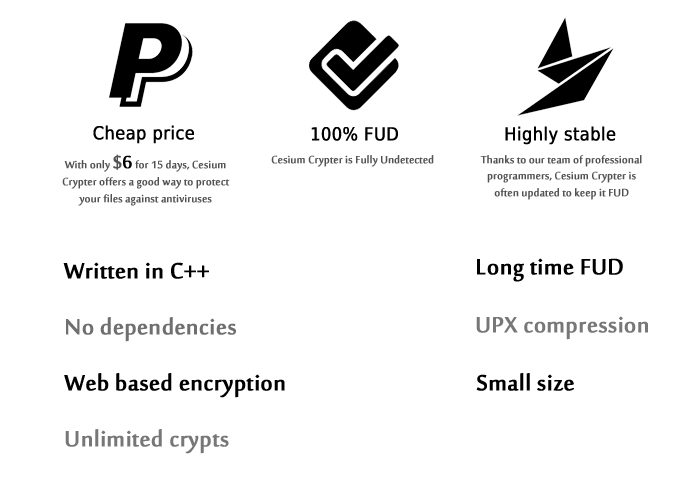
<style>
.page{position:relative;width:700px;height:500px;background:#ffffff}
.page>*{position:absolute;margin:0}
.t1{font:18px "DejaVuSansCondensed";color:#000000;font-weight:bold}
.t2{font:14px "SakkalMajalla";color:#525252;font-weight:bold}
.t3{font:24px "SakkalMajalla";color:#525252;font-weight:bold}
.t4{font:24px "SakkalMajalla";color:#000000;font-weight:bold}
.t5{font:30px "SakkalMajalla";color:#000000;font-weight:bold}
.t6{font:30px "SakkalMajalla";color:#6f6f6f;font-weight:bold}
.t7{font:30px "SakkalMajalla";color:#777777;font-weight:bold}
</style>
<div class="page">
<p class="t1" style="left:93px;top:125px;width:101px;height:19px">Cheap price</p>
<p class="t1" style="left:505px;top:126px;width:111px;height:19px">Highly stable</p>
<p class="t1" style="left:311px;top:127px;width:87px;height:14px">100% FUD</p>
<p class="t2" style="left:62px;top:154px;width:168px;height:52px;text-align:center">With only <span class="t3">$</span><span class="t4">6</span> for 15 days, Cesium Crypter offers a good way to protect your files against antiviruses</p>
<p class="t2" style="left:271px;top:155px;width:163px;height:12px">Cesium Crypter is Fully Undetected</p>
<p class="t2" style="left:480px;top:155px;width:162px;height:45px;text-align:center">Thanks to our team of professional programmers, Cesium Crypter is often updated to keep it FUD</p>
<p class="t5" style="left:63px;top:262px;width:146px;height:17px">Written in C++</p>
<p class="t5" style="left:477px;top:258px;width:146px;height:24px">Long time FUD</p>
<p class="t6" style="left:66px;top:317px;width:170px;height:25px">No dependencies</p>
<p class="t7" style="left:476px;top:316px;width:172px;height:24px">UPX compression</p>
<p class="t5" style="left:64px;top:373px;width:221px;height:25px">Web based encryption</p>
<p class="t5" style="left:476px;top:373px;width:98px;height:18px">Small size</p>
<p class="t7" style="left:65px;top:429px;width:164px;height:25px">Unlimited crypts</p>
</div>
